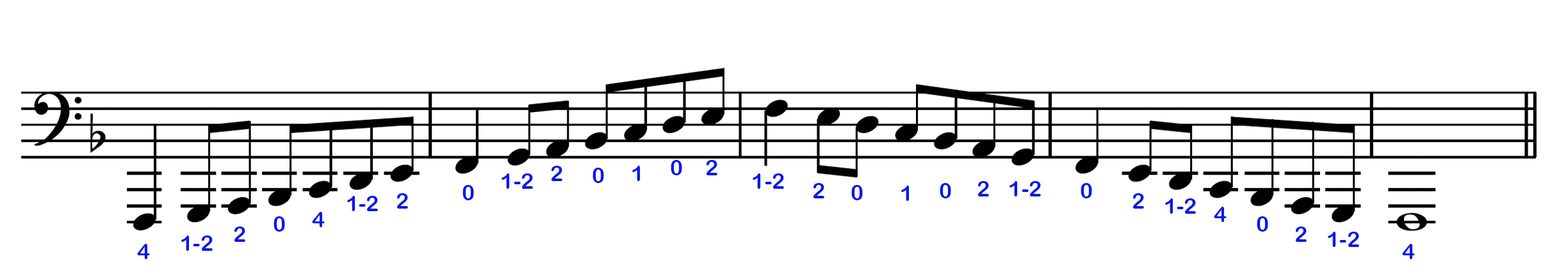
<style>
.page{position:relative;width:1568px;height:279px;background:#ffffff}
.page>*{position:absolute;margin:0}
.t1{font:21.8px "ArialRoundedMTBold";color:#0417ec}
</style>
<div class="page">
<p class="t1" style="left:671px;top:160px;width:11px;height:16px">0</p>
<p class="t1" style="left:706px;top:160px;width:11px;height:16px">2</p>
<p class="t1" style="left:502px;top:174px;width:31px;height:15px">1-2</p>
<p class="t1" style="left:551px;top:166px;width:11px;height:15px">2</p>
<p class="t1" style="left:592px;top:168px;width:12px;height:15px">0</p>
<p class="t1" style="left:632px;top:166px;width:9px;height:15px">1</p>
<p class="t1" style="left:753px;top:174px;width:31px;height:15px">1-2</p>
<p class="t1" style="left:462px;top:185px;width:12px;height:15px">0</p>
<p class="t1" style="left:813px;top:183px;width:11px;height:16px">2</p>
<p class="t1" style="left:851px;top:185px;width:12px;height:15px">0</p>
<p class="t1" style="left:901px;top:186px;width:9px;height:15px">1</p>
<p class="t1" style="left:940px;top:183px;width:11px;height:16px">0</p>
<p class="t1" style="left:977px;top:181px;width:12px;height:16px">2</p>
<p class="t1" style="left:1009px;top:181px;width:32px;height:16px">1-2</p>
<p class="t1" style="left:1081px;top:183px;width:11px;height:16px">0</p>
<p class="t1" style="left:347px;top:196px;width:31px;height:15px">1-2</p>
<p class="t1" style="left:396px;top:193px;width:12px;height:16px">2</p>
<p class="t1" style="left:1132px;top:193px;width:12px;height:16px">2</p>
<p class="t1" style="left:1165px;top:199px;width:31px;height:15px">1-2</p>
<p class="t1" style="left:1214px;top:207px;width:13px;height:15px">4</p>
<p class="t1" style="left:274px;top:216px;width:11px;height:16px">0</p>
<p class="t1" style="left:312px;top:212px;width:13px;height:15px">4</p>
<p class="t1" style="left:1257px;top:216px;width:11px;height:16px">0</p>
<p class="t1" style="left:234px;top:227px;width:11px;height:15px">2</p>
<p class="t1" style="left:1295px;top:227px;width:12px;height:15px">2</p>
<p class="t1" style="left:1328px;top:232px;width:31px;height:15px">1-2</p>
<p class="t1" style="left:137px;top:244px;width:13px;height:15px">4</p>
<p class="t1" style="left:181px;top:236px;width:32px;height:15px">1-2</p>
<p class="t1" style="left:1402px;top:244px;width:13px;height:15px">4</p>
</div>
